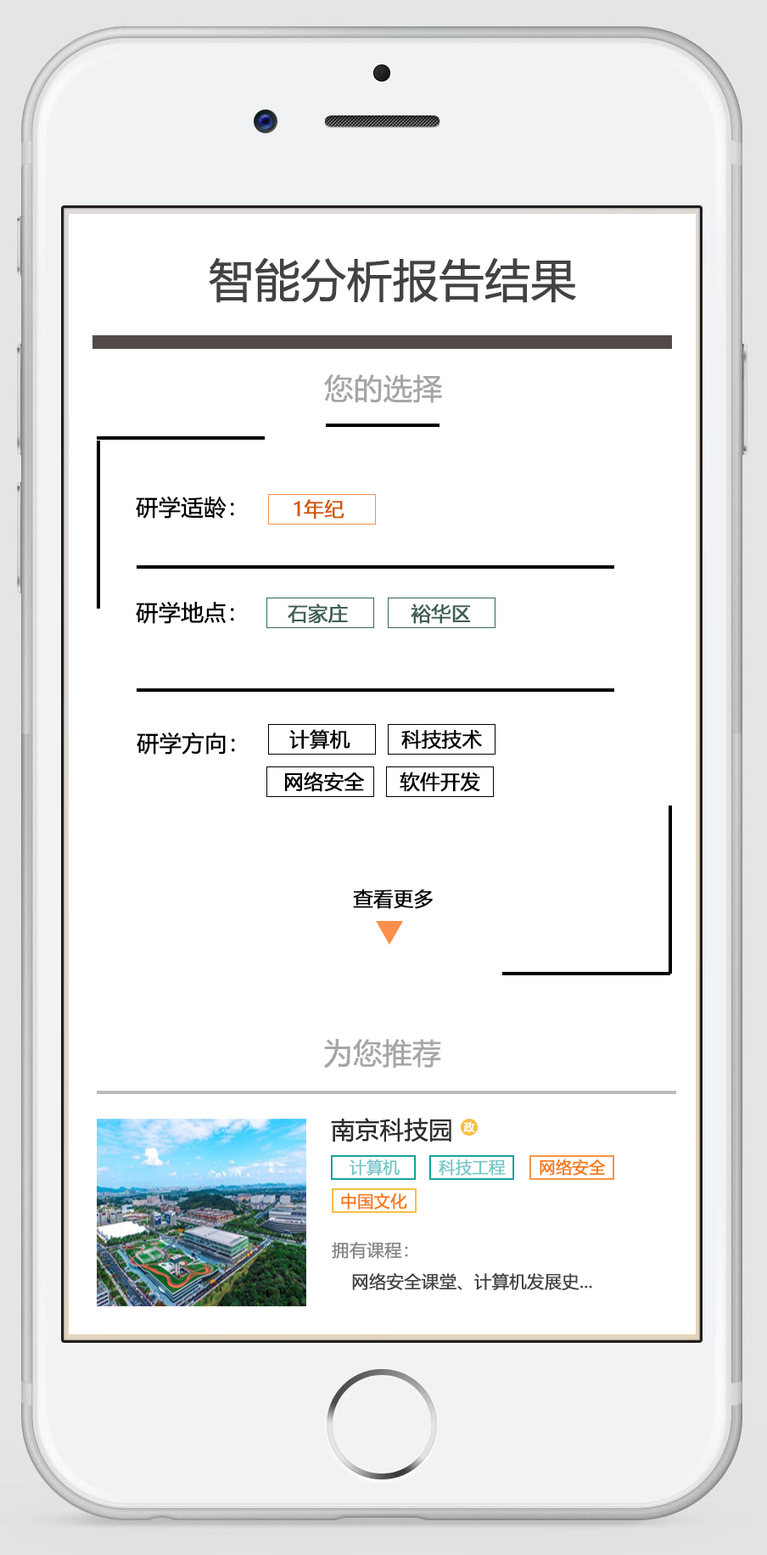
<style>
.page{position:relative;width:767px;height:1555px;background:#ffffff}
.page>*{position:absolute;margin:0}
.t1{font:45.3px "MicrosoftYaHei";letter-spacing:-0.01em;color:#444144;font-weight:bold}
.t2{font:29.1px "MicrosoftYaHei";letter-spacing:-0.01em;color:#a6a6a6;font-weight:bold}
.t3{font:22.3px "MicrosoftYaHei";letter-spacing:-0.01em;color:#000000;font-weight:bold}
.t4{font:19.8px "MicrosoftYaHei";letter-spacing:-0.01em;color:#d4570b;font-weight:bold}
.t5{font:19.8px "MicrosoftYaHei";letter-spacing:-0.01em;color:#3e5e53;font-weight:bold}
.t6{font:19.8px "MicrosoftYaHei";letter-spacing:-0.01em;color:#000000;font-weight:bold}
.t7{font:24px "MicrosoftYaHei";letter-spacing:-0.01em;color:#2d2d2d;font-weight:bold}
.t8{font:11.3px "MicrosoftYaHei";letter-spacing:-0.01em;color:#ffffff;font-weight:bold}
.t9{font:16.4px "MicrosoftYaHei";letter-spacing:-0.01em;color:#75c7c8;font-weight:bold}
.t10{font:16.4px "MicrosoftYaHei";letter-spacing:-0.01em;color:#f9770e;font-weight:bold}
.t11{font:17.3px "MicrosoftYaHei";letter-spacing:-0.01em;color:#898989;font-weight:bold}
.t12{font:17.3px "MicrosoftYaHei";letter-spacing:-0.01em;color:#444444;font-weight:bold}
</style>
<div class="page">
<p class="t1" style="left:209px;top:258px;width:367px;height:45px">智能分析报告结果</p>
<p class="t2" style="left:324px;top:374px;width:118px;height:29px">您的选择</p>
<p class="t3" style="left:136px;top:496px;width:98px;height:22px">研学适龄：</p>
<p class="t4" style="left:294px;top:499px;width:51px;height:20px">1年纪</p>
<p class="t3" style="left:136px;top:601px;width:98px;height:23px">研学地点：</p>
<p class="t5" style="left:288px;top:603px;width:60px;height:21px">石家庄</p>
<p class="t5" style="left:411px;top:603px;width:60px;height:21px">裕华区</p>
<p class="t3" style="left:137px;top:731px;width:98px;height:23px">研学方向：</p>
<p class="t6" style="left:289px;top:729px;width:61px;height:20px">计算机</p>
<p class="t6" style="left:401px;top:729px;width:81px;height:20px">科技技术</p>
<p class="t6" style="left:285px;top:771px;width:80px;height:21px">网络安全</p>
<p class="t6" style="left:400px;top:771px;width:80px;height:21px">软件开发</p>
<p class="t6" style="left:353px;top:888px;width:80px;height:21px">查看更多</p>
<p class="t2" style="left:324px;top:1039px;width:117px;height:29px">为您推荐</p>
<p class="t7" style="left:331px;top:1118px;width:120px;height:24px">南京科技园</p>
<p class="t8" style="left:463px;top:1121px;width:12px;height:12px">政</p>
<p class="t9" style="left:350px;top:1158px;width:50px;height:17px">计算机</p>
<p class="t9" style="left:439px;top:1158px;width:67px;height:17px">科技工程</p>
<p class="t10" style="left:540px;top:1158px;width:66px;height:17px">网络安全</p>
<p class="t10" style="left:341px;top:1193px;width:66px;height:16px">中国文化</p>
<p class="t11" style="left:332px;top:1241px;width:76px;height:17px">拥有课程：</p>
<p class="t12" style="left:352px;top:1272px;width:240px;height:19px">网络安全课堂、计算机发展史...</p>
</div>
